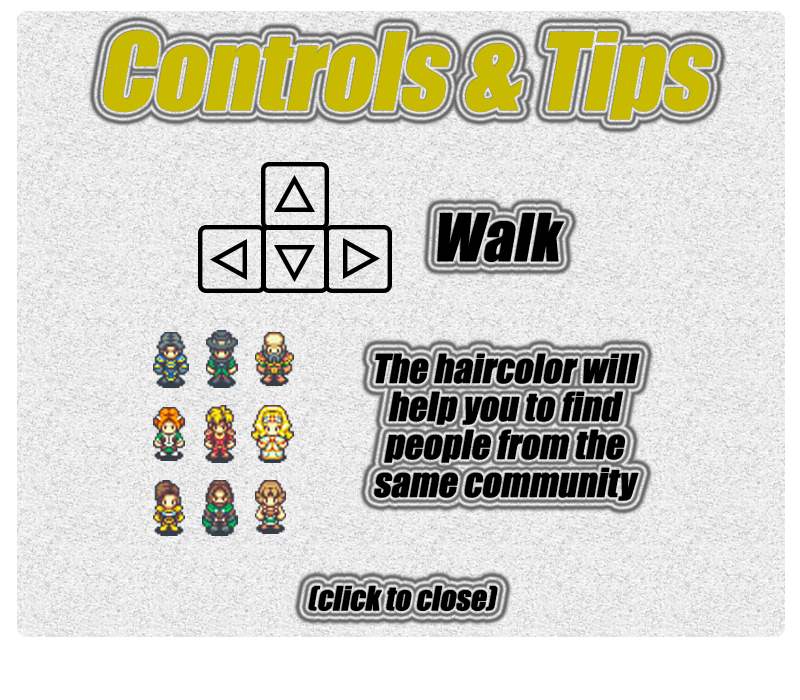
<style>
.page{position:relative;width:800px;height:700px}
.page>*{position:absolute;margin:0}
.t1{font:99px "Impact";color:#c7ba00;font-style:italic}
.t2{font:61px "Impact";color:#000000;font-style:italic}
.t3{font:37px/38px "Impact";color:#000000;font-style:italic}
.t4{font:31px "Impact";color:#000000;font-style:italic}
</style>
<div class="page">
<p class="t1" style="left:103px;top:30px;width:610px;height:90px">Controls &amp; Tips</p>
<p class="t2" style="left:437px;top:213px;width:127px;height:49px">Walk</p>
<p class="t3" style="left:374px;top:353px;width:266px;height:148px;text-align:center">The haircolor will help you to find people from the same community</p>
<p class="t4" style="left:308px;top:586px;width:190px;height:25px">(click to close)</p>
</div>
